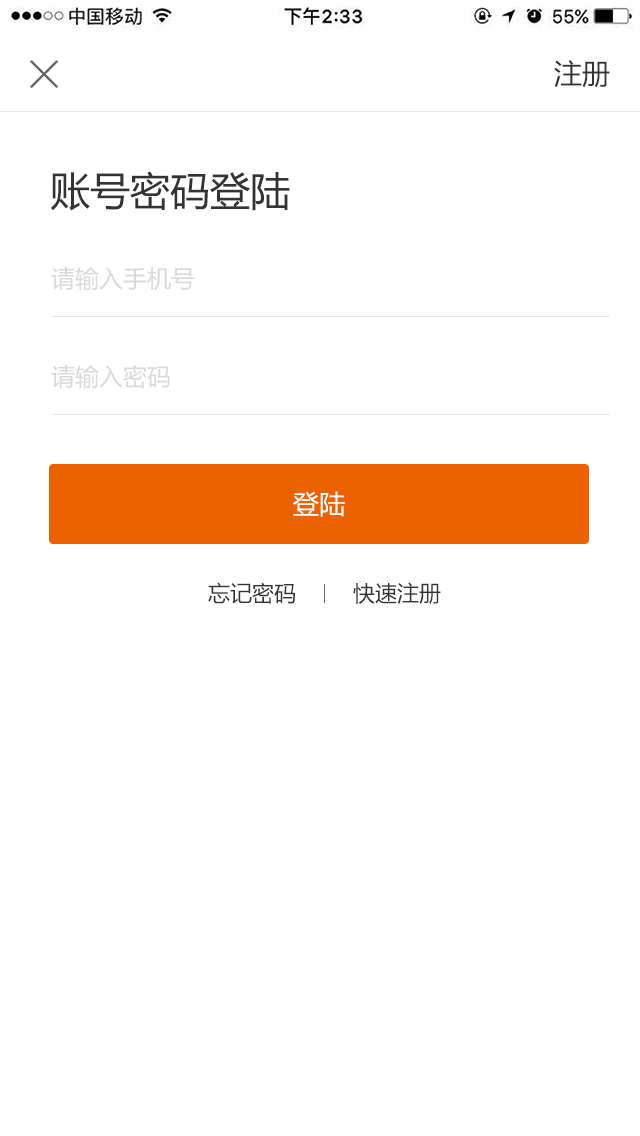
<style>
.page{position:relative;width:640px;height:1136px;background:#ffffff}
.page>*{position:absolute;margin:0}
.t1{font:28px "MicrosoftYaHei";color:#333333}
.t2{font:40px "MicrosoftYaHei";color:#333333}
.t3{font:24px "MicrosoftYaHei";color:#dadada}
.t4{font:26px "MicrosoftYaHei";color:#ffffff}
.t5{font:22px "MicrosoftYaHei";color:#333333}
</style>
<div class="page">
<p class="t1" style="left:554px;top:60px;width:56px;height:28px">注册</p>
<p class="t2" style="left:50px;top:171px;width:240px;height:40px">账号密码登陆</p>
<p class="t3" style="left:51px;top:267px;width:144px;height:24px">请输入手机号</p>
<p class="t3" style="left:51px;top:365px;width:119px;height:24px">请输入密码</p>
<p class="t4" style="left:293px;top:491px;width:52px;height:26px">登陆</p>
<p class="t5" style="left:208px;top:582px;width:87px;height:22px">忘记密码</p>
<p class="t5" style="left:353px;top:582px;width:88px;height:22px">快速注册</p>
</div>
